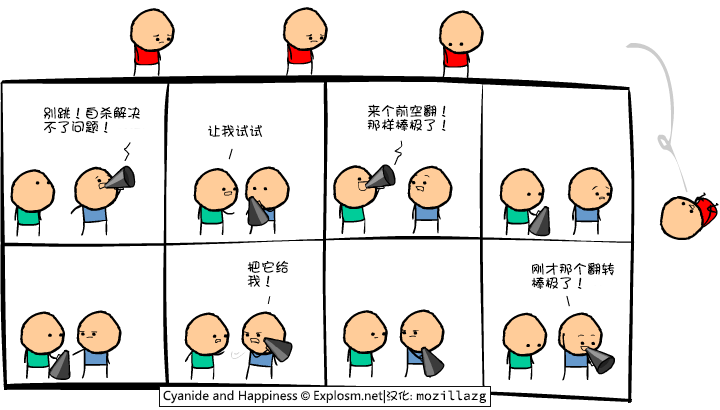
<style>
.page{position:relative;width:720px;height:410px;background:#ffffff}
.page>*{position:absolute;margin:0}
.t1{font:14px/14px "DFGirl";color:#000000}
.t2{font:14px "DFGirl";color:#000000}
</style>
<div class="page">
<p class="t1" style="left:43px;top:106px;width:97px;height:28px">别跳！自杀解决<br>不了问题！</p>
<p class="t1" style="left:367px;top:104px;width:79px;height:27px">来个前空翻！<br>那样棒极了！</p>
<p class="t2" style="left:208px;top:124px;width:55px;height:13px">让我试试</p>
<p class="t1" style="left:247px;top:260px;width:42px;height:27px">把它给<br>我！</p>
<p class="t1" style="left:531px;top:262px;width:84px;height:27px">刚才那个翻转<br>棒极了！</p>
</div>
